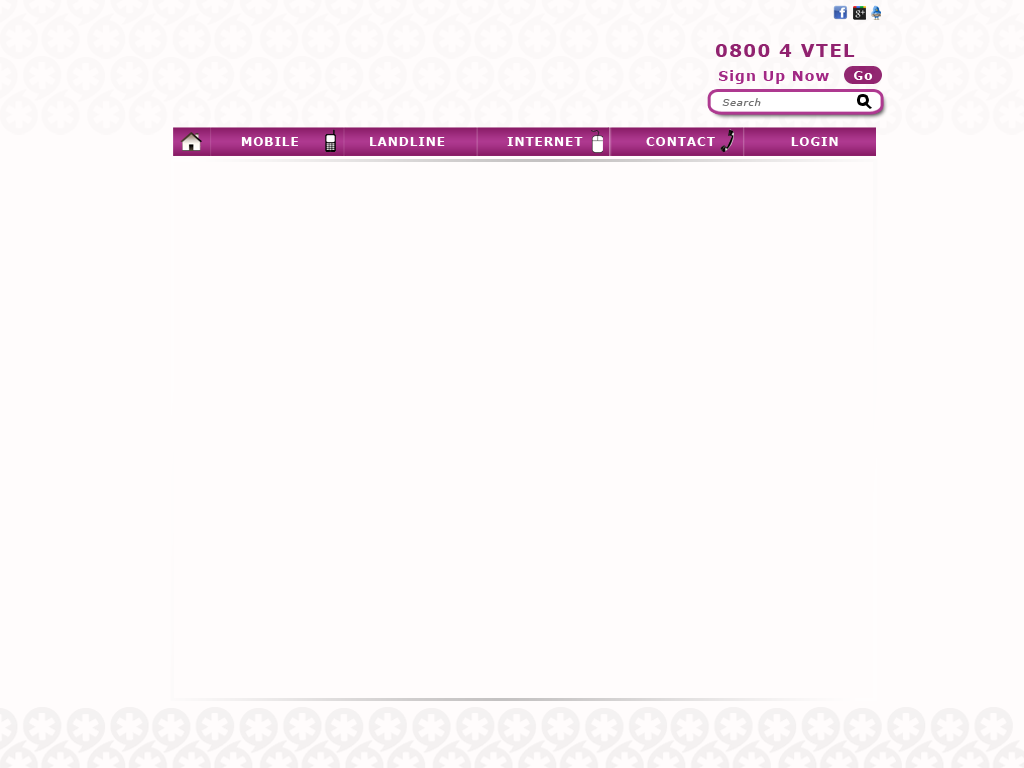
<style>
.page{position:relative;width:1024px;height:768px;background:#fffcfc}
.page>*{position:absolute;margin:0}
.t1{font:18px "Verdana-Bold";letter-spacing:0.075em;color:#91226f}
.t2{font:14px "Verdana-Bold";letter-spacing:0.075em;color:#a22684}
.t3{font:12px "Verdana-Bold";letter-spacing:0.075em;color:#ffffff}
.t4{font:10px "Verdana-Italic";letter-spacing:0.075em;color:#707070}
.t5{font:12.8px "StoneSans";letter-spacing:0.075em;color:#000000;scale:1.94 1}
</style>
<div class="page">
<p class="t1" style="left:716px;top:44px;width:139px;height:13px">0800 4 VTEL</p>
<p class="t2" style="left:719px;top:70px;width:110px;height:14px">Sign Up Now</p>
<p class="t3" style="left:854px;top:71px;width:19px;height:9px">Go</p>
<p class="t4" style="left:722px;top:98px;width:39px;height:8px">Search</p>
<p class="t5" style="left:863px;top:101px;width:9px;height:8px;rotate:-29deg">I</p>
<p class="t3" style="left:241px;top:137px;width:597px;height:9px">MOBILE      LANDLINE           INTERNET          CONTACT               LOGIN</p>
</div>
